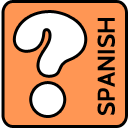
<style>
.page{position:relative;width:128px;height:128px;background:#ff9654}
.page>*{position:absolute;margin:0}
.t1{font:24.3px "Cabin-Bold";color:#000000}
</style>
<div class="page">
<p class="t1" style="left:97px;top:18px;width:18px;height:97px;rotate:-90deg">SPANISH</p>
</div>
